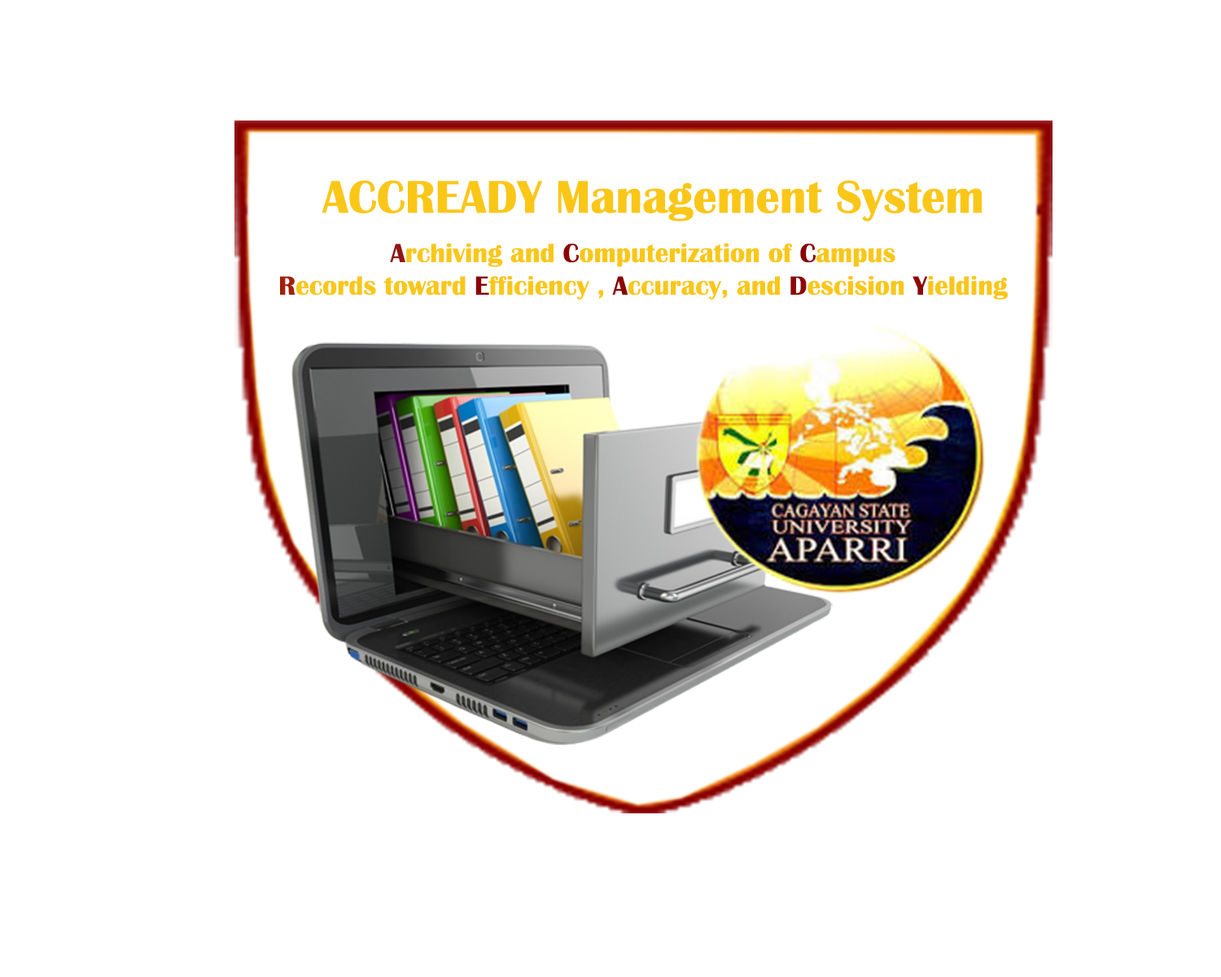
<style>
.page{position:relative;width:1221px;height:977px;background:#ffffff}
.page>*{position:absolute;margin:0}
.t1{font:47.5px "BritannicBold";color:#fac717}
.t2{font:27.1px "BritannicBold";color:#fac717}
.t3{font:27.1px "BritannicBold";color:#931518}
.t4{font:27.1px "BritannicBold";color:#8c0404}
.t5{font:27.1px "BritannicBold";color:#8a0104}
.t6{font:27.1px "BritannicBold";color:#a1210a}
.t7{font:27.1px "BritannicBold";color:#8b0304}
.t8{font:27.1px "BritannicBold";color:#8d0809}
.t9{font:27.1px "BritannicBold";color:#8d0706}
</style>
<div class="page">
<p class="t1" style="left:321px;top:180px;width:661px;height:41px">ACCREADY Management System</p>
<p class="t2" style="left:280px;top:243px;width:728px;height:57px;text-align:center"><span class="t3">A</span>rchiving and <span class="t4">C</span>omputerization of <span class="t5">C</span>ampus <br><span class="t6">R</span>ecords toward <span class="t7">E</span>fficiency , <span class="t5">A</span>ccuracy, and <span class="t8">D</span>escision <span class="t9">Y</span>ielding</p>
</div>
